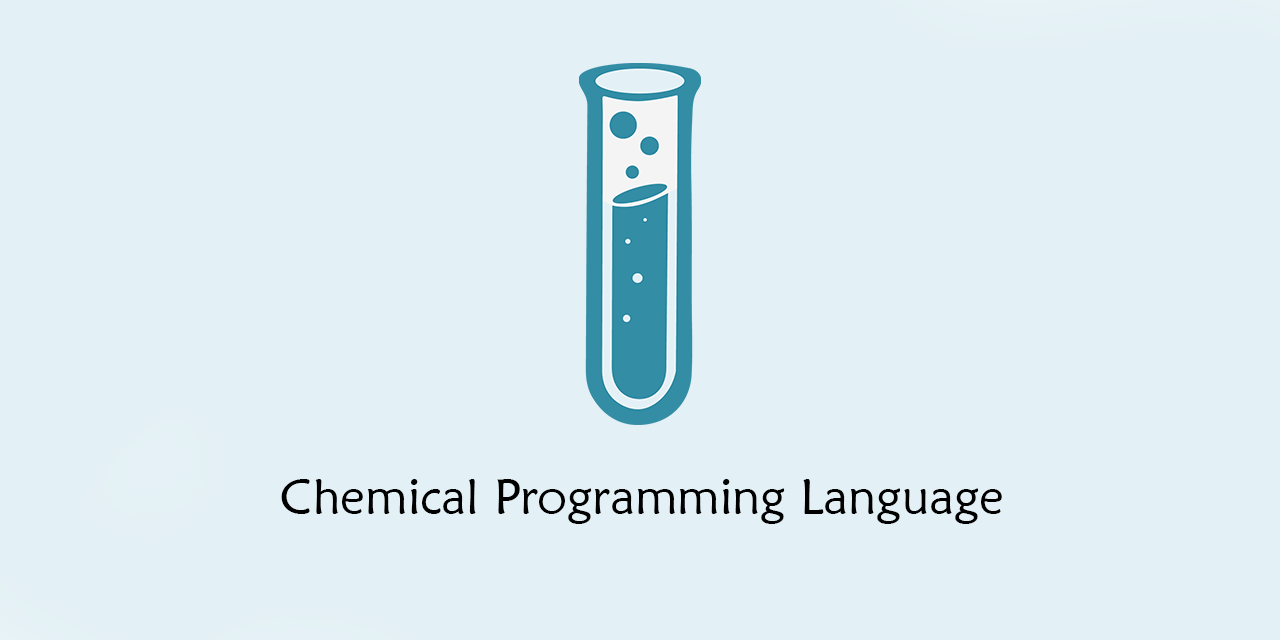
<style>
.page{position:relative;width:1280px;height:640px;background:#e3f0f5}
.page>*{position:absolute;margin:0}
.t1{font:50px "MaiandraGD-Regular";color:#000000}
</style>
<div class="page">
<p class="t1" style="left:281px;top:479px;width:721px;height:45px">Chemical Programming Language</p>
</div>
